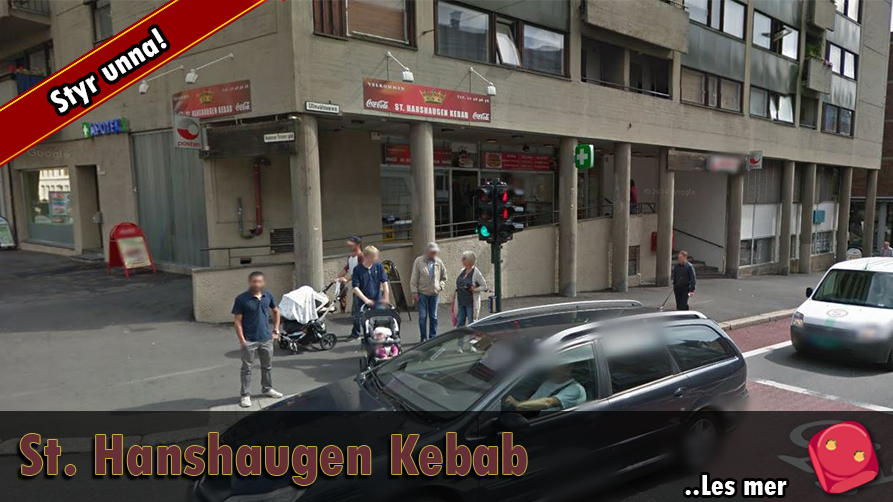
<style>
.page{position:relative;width:893px;height:502px}
.page>*{position:absolute;margin:0}
.t1{font:33px "TwCenMT-CondensedExtraBold";color:#ffffff}
.t2{font:60px "TwCenMT-CondensedExtraBold";color:#662e35}
.t3{font:30px "TwCenMT-CondensedExtraBold";color:#ffffff}
</style>
<div class="page">
<p class="t1" style="left:50px;top:28px;width:117px;height:85px;rotate:-32deg">Styr unna!</p>
<p class="t2" style="left:20px;top:433px;width:507px;height:52px">St. Hanshaugen Kebab</p>
<p class="t3" style="left:685px;top:475px;width:102px;height:20px">..Les mer</p>
</div>
